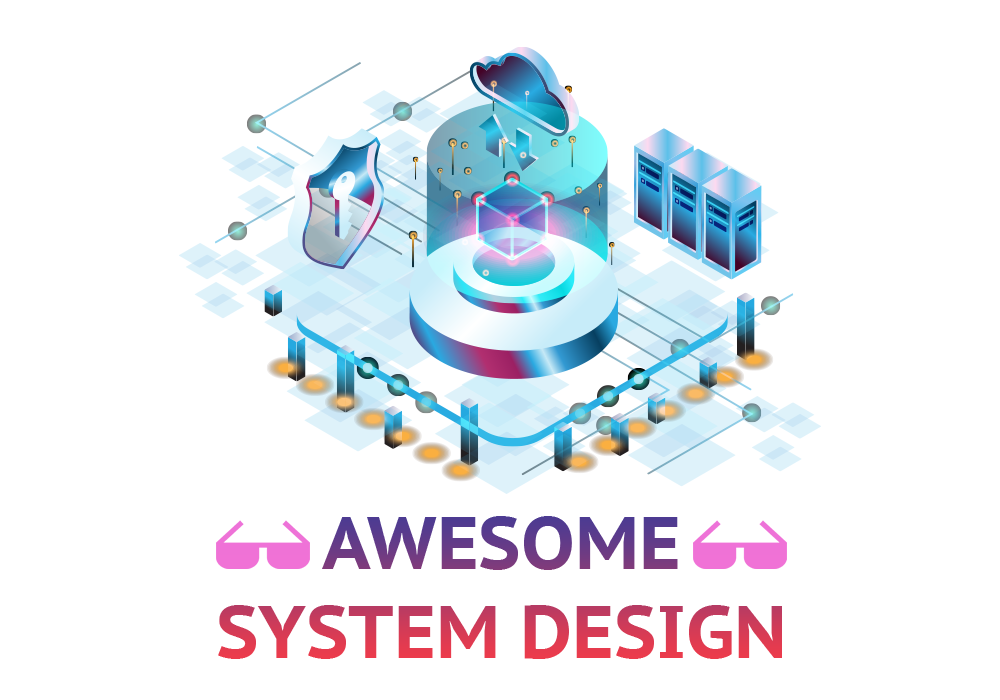
<style>
.page{position:relative;width:1000px;height:700px;background:#ffffff}
.page>*{position:absolute;margin:0}
.t1{font:74px "PTSans-CaptionBold"}
</style>
<div class="page">
<p class="t1" style="left:218px;top:516px;width:564px;height:143px;text-align:center">AWESOME<br>SYSTEM DESIGN</p>
</div>
